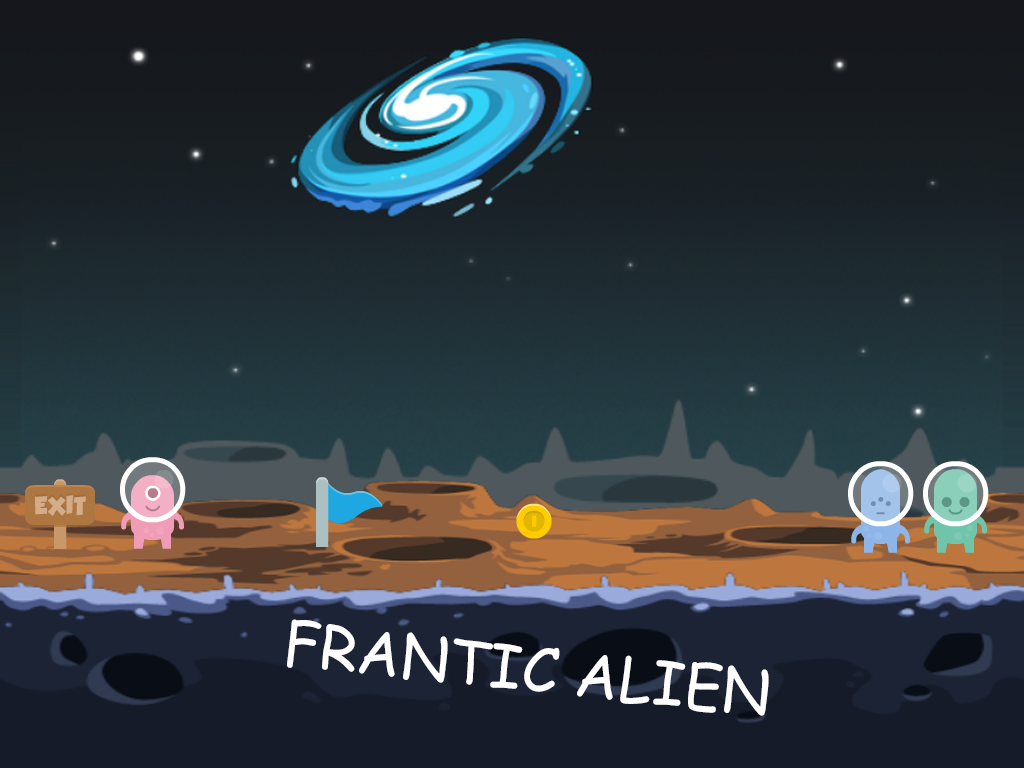
<style>
.page{position:relative;width:1024px;height:768px}
.page>*{position:absolute;margin:0}
.t1{font:60px "ComicSansMS";color:#ffffff}
</style>
<div class="page">
<p class="t1" style="left:287px;top:619px;width:482px;height:97px;rotate:6deg">FRANTIC ALIEN</p>
</div>
